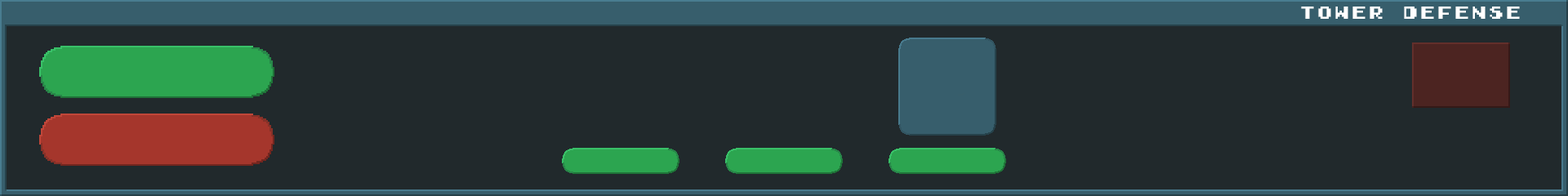
<style>
.page{position:relative;width:1568px;height:196px;background:#21292c}
.page>*{position:absolute;margin:0}
.t1{font:16.3px "GamegirlClassic";letter-spacing:0.05em;color:#ffffff}
</style>
<div class="page">
<p class="t1" style="left:1301px;top:7px;width:219px;height:12px">tower defense</p>
</div>
